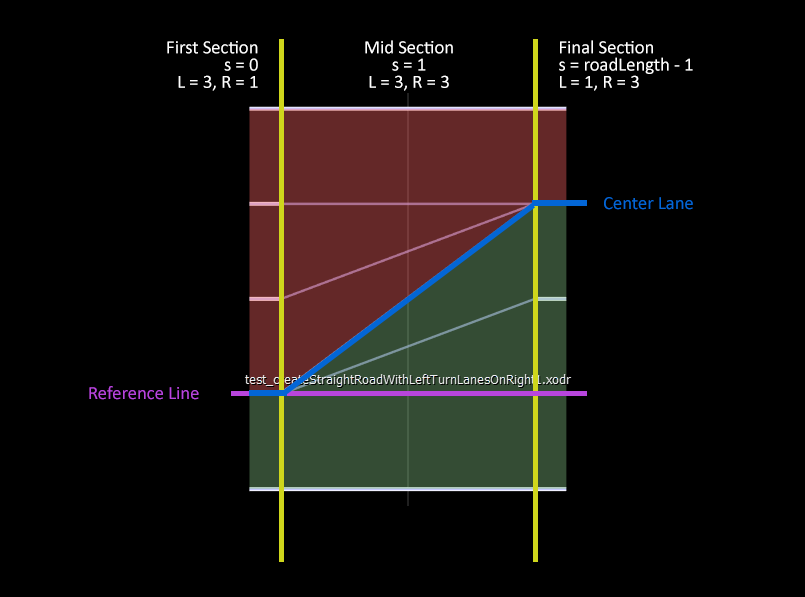
<style>
.page{position:relative;width:805px;height:597px;background:#000000}
.page>*{position:absolute;margin:0}
.t1{font:18.7px/8.7px "Calibri";color:#ffffff}
.t2{font:18.7px "Calibri";color:#0366d6}
.t3{font:18.7px "Calibri";color:#b845dd}
</style>
<div class="page">
<p class="t1" style="left:167px;top:41px;width:91px;height:50px;text-align:right">First Section<br><br>s = 0<br><br>L = 3, R = 1</p>
<p class="t1" style="left:365px;top:40px;width:88px;height:51px;text-align:center">Mid Section<br><br>s = 1<br><br>L = 3, R = 3</p>
<p class="t1" style="left:559px;top:40px;width:134px;height:51px">Final Section<br><br>s = roadLength - 1<br><br>L = 1, R = 3</p>
<p class="t2" style="left:604px;top:197px;width:89px;height:13px">Center Lane</p>
<p class="t3" style="left:89px;top:386px;width:110px;height:14px">Reference Line</p>
</div>
